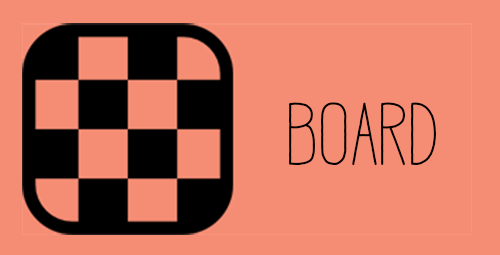
<style>
.page{position:relative;width:500px;height:255px;background:#f58d74}
.page>*{position:absolute;margin:0}
.t1{font:125px "Adrift";color:#000000}
</style>
<div class="page">
<p class="t1" style="left:289px;top:102px;width:147px;height:63px">Board</p>
</div>
